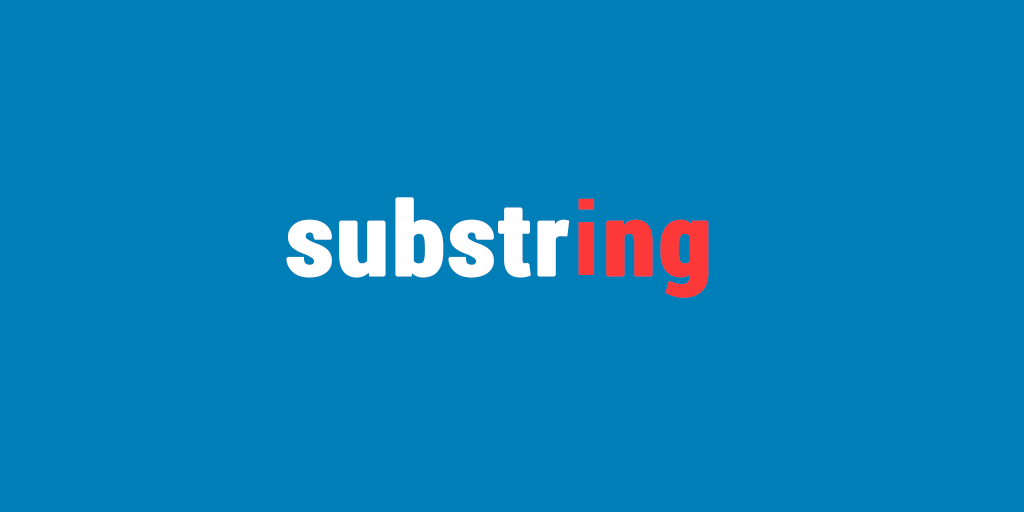
<style>
.page{position:relative;width:1024px;height:512px;background:#007eb8}
.page>*{position:absolute;margin:0}
.t1{font:100px "RobotoCondensed-Bold";color:#ffffff;font-weight:bold;scale:1.13 1}
.t2{font:100px "RobotoCondensed-Bold";color:#fd3838;font-weight:bold;scale:1.13 1}
</style>
<div class="page">
<p class="t1" style="left:286px;top:197px;width:284px;height:81px">substr</p>
<p class="t2" style="left:578px;top:198px;width:131px;height:100px">ing</p>
</div>
